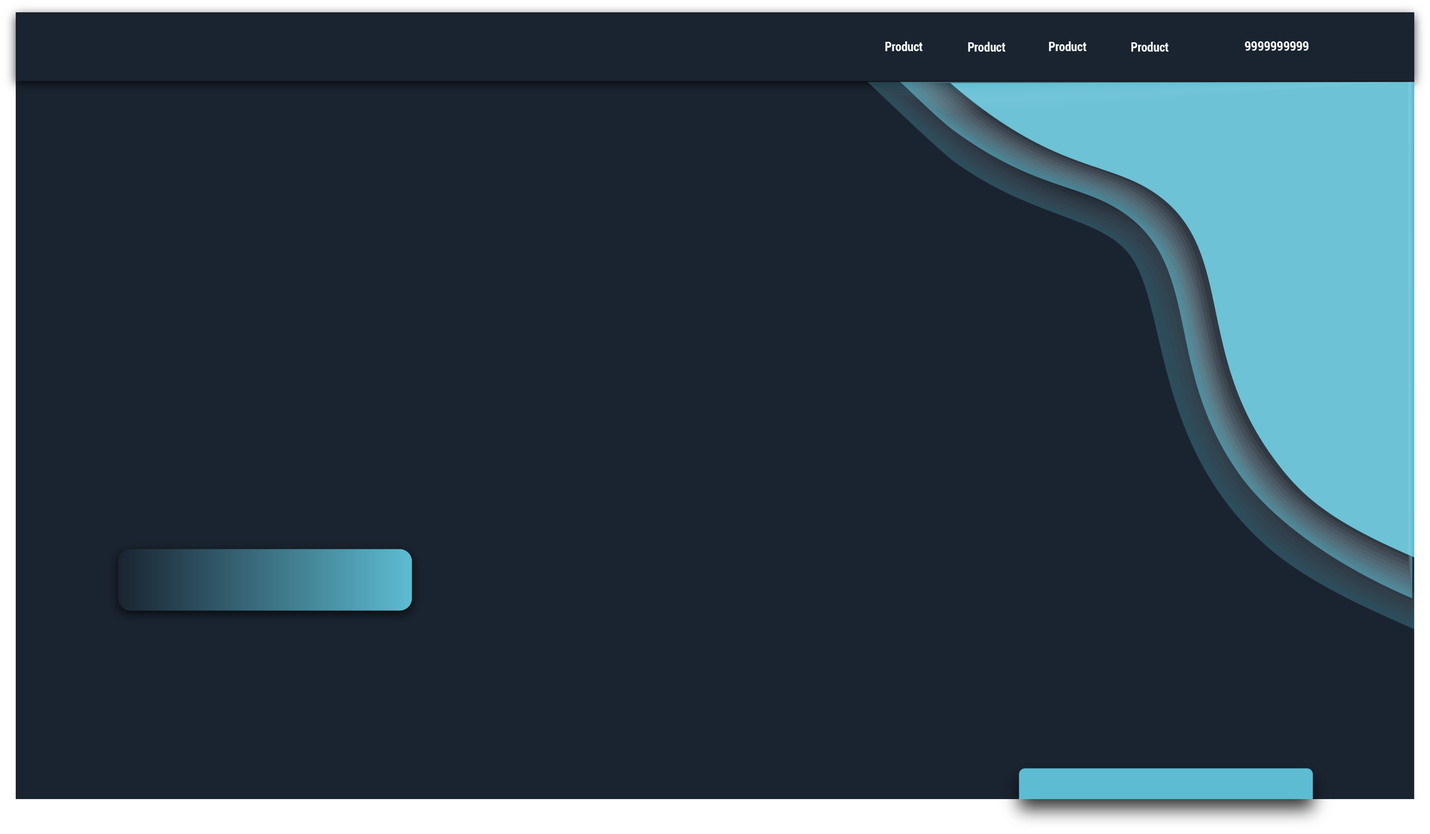
<style>
.page{position:relative;width:1430px;height:834px;background:#1a2430}
.page>*{position:absolute;margin:0}
.t1{font:12.3px "Roboto-BoldCondensed";color:#f7f9f9}
</style>
<div class="page">
<p class="t1" style="left:885px;top:41px;width:38px;height:10px">Product</p>
<p class="t1" style="left:968px;top:42px;width:38px;height:10px">Product</p>
<p class="t1" style="left:1049px;top:41px;width:38px;height:10px">Product</p>
<p class="t1" style="left:1132px;top:42px;width:37px;height:10px">Product</p>
<p class="t1" style="left:1245px;top:41px;width:64px;height:10px">9999999999</p>
</div>
